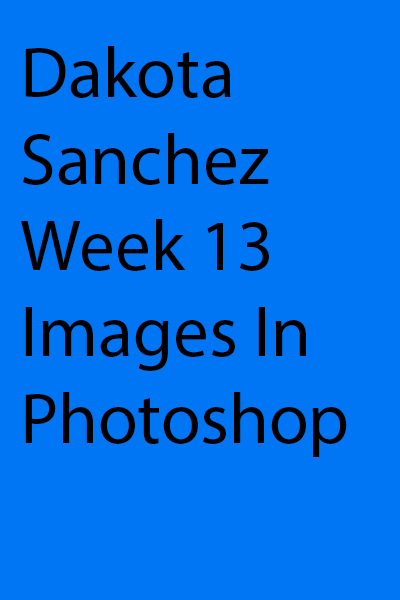
<style>
.page{position:relative;width:400px;height:600px;background:#0076f5}
.page>*{position:absolute;margin:0}
.t1{font:72px "MyriadPro-Regular";color:#000000}
</style>
<div class="page">
<p class="t1" style="left:21px;top:46px;width:326px;height:411px">Dakota Sanchez Week 13 Images In Photoshop</p>
</div>
